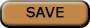
<style>
.page{position:relative;width:90px;height:28px;background:#bf8847}
.page>*{position:absolute;margin:0}
.t1{font:14px "Verdana";color:#000000;font-weight:bold}
</style>
<div class="page">
<p class="t1" style="left:26px;top:7px;width:38px;height:11px">SAVE</p>
</div>
